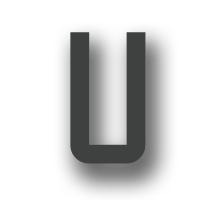
<style>
.page{position:relative;width:215px;height:200px;background:#ffffff}
.page>*{position:absolute;margin:0}
.t1{font:150px "Manteka";color:#3f4040}
</style>
<div class="page">
<p class="t1" style="left:70px;top:32px;width:76px;height:132px">U</p>
</div>
